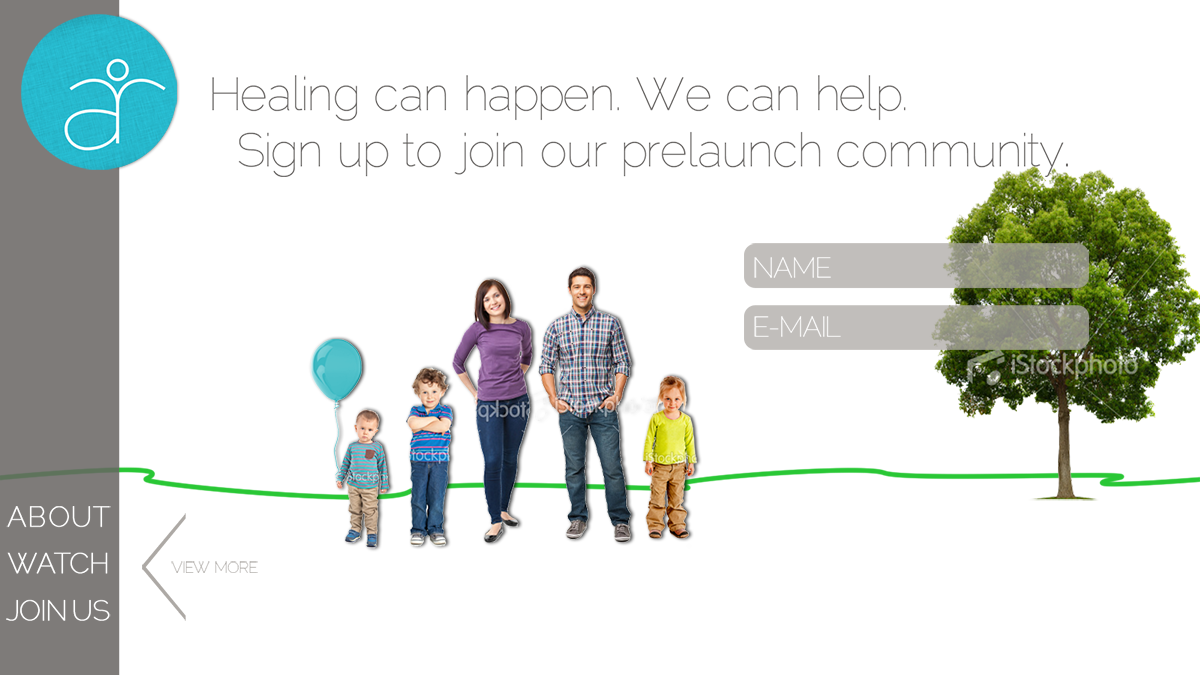
<style>
.page{position:relative;width:1200px;height:675px;background:#ffffff}
.page>*{position:absolute;margin:0}
.t1{font:46.9px/56.2px "Raleway-Thin";letter-spacing:-0.02em;color:#676462}
.t2{font:28.1px "Raleway-Thin";letter-spacing:-0.02em;color:#ffffff}
.t3{font:28.1px/46.9px "Raleway-Thin";letter-spacing:-0.02em;color:#ffffff;font-weight:bold}
.t4{font:28.1px/46.9px "Raleway-Thin";letter-spacing:0.04em;color:#ffffff;font-weight:bold}
.t5{font:28.1px/46.9px "Raleway-Thin";letter-spacing:-0.08em;color:#ffffff;font-weight:bold}
.t6{font:28.1px/46.9px "Raleway-Thin";letter-spacing:-0.04em;color:#ffffff;font-weight:bold}
.t7{font:15.6px "Raleway-Thin";letter-spacing:-0.02em;color:#ada9a5}
</style>
<div class="page">
<p class="t1" style="left:212px;top:75px;width:856px;height:102px">Healing can happen. We can help.<br> Sign up to join our prelaunch community.</p>
<p class="t2" style="left:754px;top:257px;width:77px;height:21px">NAME</p>
<p class="t2" style="left:754px;top:316px;width:87px;height:21px">E-MAIL</p>
<p class="t3" style="left:6px;top:506px;width:105px;height:115px"><span class="t4">ABOUT<br></span><span class="t5">WA</span><span class="t6">T</span>CH<br>JOIN US</p>
<p class="t7" style="left:171px;top:561px;width:87px;height:12px">VIEW MORE</p>
</div>
